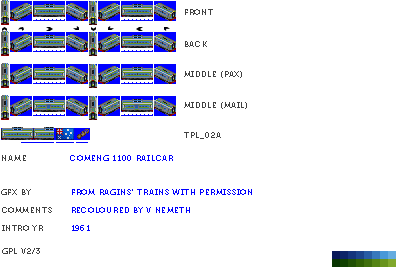
<style>
.page{position:relative;width:400px;height:270px;background:#ffffff}
.page>*{position:absolute;margin:0}
.t1{font:8px "Museo700-Regular";letter-spacing:0.075em;color:#404040;text-transform:uppercase}
.t2{font:8px "Museo700-Regular";letter-spacing:0.075em;color:#0000ff;text-transform:uppercase}
</style>
<div class="page">
<p class="t1" style="left:185px;top:9px;width:28px;height:6px">front</p>
<p class="t1" style="left:185px;top:41px;width:22px;height:6px">back</p>
<p class="t1" style="left:184px;top:71px;width:58px;height:7px">middle (pax)</p>
<p class="t1" style="left:184px;top:102px;width:63px;height:7px">middle (mail)</p>
<p class="t1" style="left:184px;top:132px;width:37px;height:7px">tpl_02a</p>
<p class="t1" style="left:2px;top:155px;width:24px;height:6px">name</p>
<p class="t2" style="left:70px;top:155px;width:103px;height:6px">comeng 1100 railcar</p>
<p class="t1" style="left:1px;top:189px;width:30px;height:6px">gfx by</p>
<p class="t2" style="left:72px;top:189px;width:180px;height:6px">from ragins’ trains with permission</p>
<p class="t1" style="left:2px;top:207px;width:50px;height:6px">comments</p>
<p class="t2" style="left:72px;top:207px;width:118px;height:6px">recoloured by v nemeth</p>
<p class="t1" style="left:2px;top:225px;width:41px;height:6px">intro yr</p>
<p class="t2" style="left:72px;top:225px;width:18px;height:6px">1961</p>
<p class="t1" style="left:2px;top:248px;width:38px;height:6px">gpl v2/3</p>
</div>
